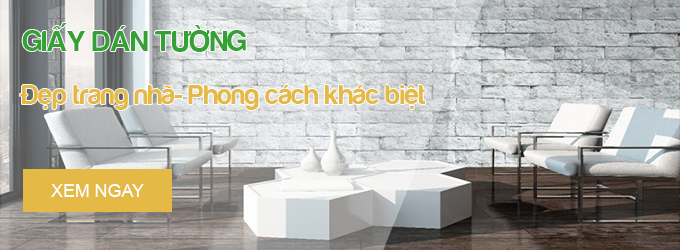
<style>
.page{position:relative;width:680px;height:250px}
.page>*{position:absolute;margin:0}
.t1{font:30px "FS-Harabara";color:#35a135}
.t2{font:28px "FS-Harabara";color:#e5b946}
.t3{font:17.8px "ArialMT";color:#ffffff}
</style>
<div class="page">
<p class="t1" style="left:22px;top:23px;width:224px;height:29px">GIẤY DÁN TƯỜNG</p>
<p class="t2" style="left:20px;top:85px;width:405px;height:25px">Đẹp trang nhã- Phong cách khác biệt</p>
<p class="t3" style="left:51px;top:184px;width:93px;height:13px">XEM NGAY</p>
</div>
